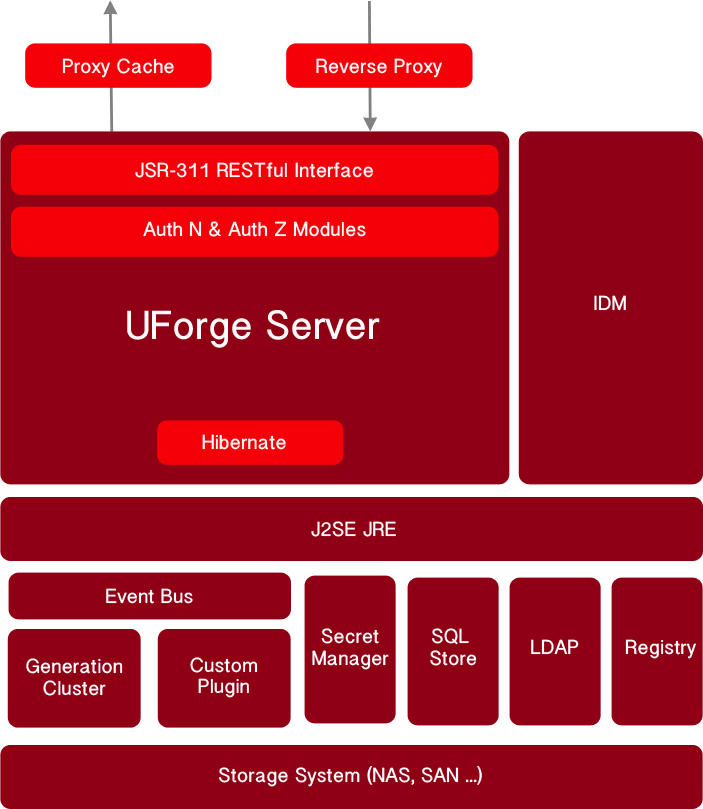
<style>
.page{position:relative;width:703px;height:809px;background:#900015}
.page>*{position:absolute;margin:0}
.t1{font:18px "BanglaSangamMN-Bold";color:#fefafa}
.t2{font:18px "BanglaSangamMN-Bold";color:#fefdfd}
.t3{font:36px "BanglaSangamMN-Bold";color:#fefafa}
</style>
<div class="page">
<p class="t1" style="left:62px;top:58px;width:112px;height:20px">Proxy Cache</p>
<p class="t1" style="left:316px;top:58px;width:126px;height:20px">Reverse Proxy</p>
<p class="t1" style="left:135px;top:162px;width:238px;height:16px">JSR-311 RESTful Interface</p>
<p class="t1" style="left:143px;top:221px;width:223px;height:16px">Auth N &amp; Auth Z Modules</p>
<p class="t2" style="left:594px;top:295px;width:32px;height:16px">IDM</p>
<p class="t3" style="left:127px;top:310px;width:253px;height:38px">UForge Server</p>
<p class="t1" style="left:202px;top:434px;width:84px;height:16px">Hibernate</p>
<p class="t2" style="left:311px;top:521px;width:85px;height:16px">J2SE JRE</p>
<p class="t2" style="left:106px;top:588px;width:87px;height:16px">Event Bus</p>
<p class="t2" style="left:312px;top:628px;width:77px;height:42px;text-align:center">Secret<br>Manager</p>
<p class="t2" style="left:430px;top:628px;width:47px;height:38px;text-align:center">SQL <br>Store</p>
<p class="t2" style="left:531px;top:639px;width:48px;height:16px">LDAP</p>
<p class="t2" style="left:625px;top:639px;width:71px;height:20px">Registry</p>
<p class="t2" style="left:26px;top:658px;width:97px;height:38px;text-align:center">Generation<br>Cluster</p>
<p class="t2" style="left:190px;top:657px;width:68px;height:41px;text-align:center">Custom<br>Plugin</p>
<p class="t2" style="left:219px;top:765px;width:263px;height:22px">Storage System (NAS, SAN ...)</p>
</div>
